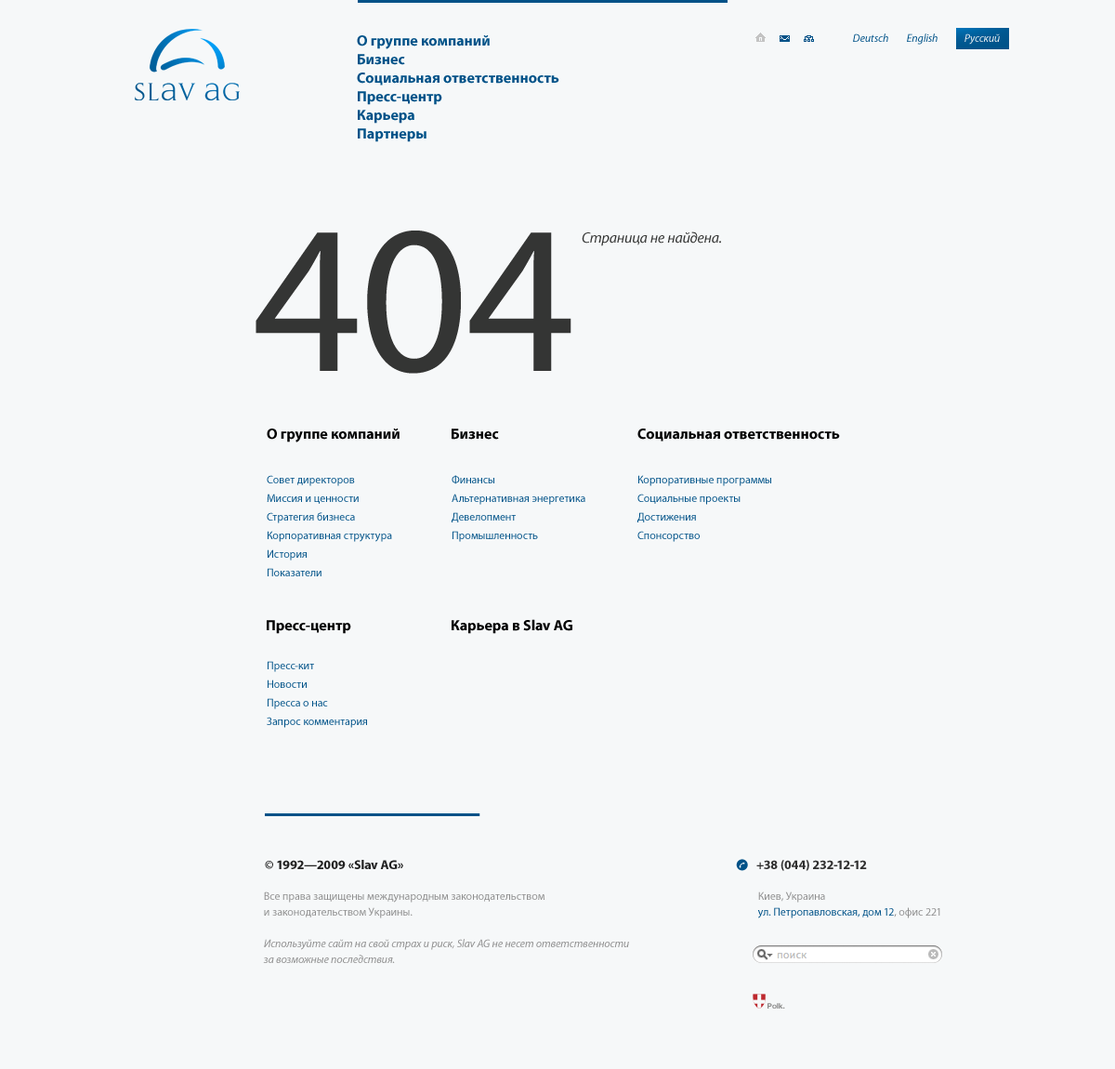
<style>
.page{position:relative;width:1115px;height:1069px;background:#f6f8f9}
.page>*{position:absolute;margin:0}
.t1{font:14.9px "MyriadPro-Bold";color:#005288}
.t2{font:11.2px "MyriadPro-It";color:#005288}
.t3{font:11.2px "MyriadPro-It";color:#eaeef1}
.t4{font:212.3px "MyriadPro-Regular";color:#343534}
.t5{font:14.9px "MyriadPro-It";color:#343534}
.t6{font:14.9px "MyriadPro-Bold";color:#000000}
.t7{font:11.2px/18.6px "MyriadPro-Regular";color:#005288}
.t8{font:13px "MyriadPro-Bold";color:#212121}
.t9{font:13px "MyriadPro-Bold";color:#303030}
.t10{font:11.2px/15.8px "MyriadPro-It";color:#8e8e8e}
.t11{font:11.2px/15.8px "MyriadPro-Regular";color:#8e8e8e}
.t12{font:11.2px/15.8px "MyriadPro-Regular";color:#005288}
.t13{font:7.4px "HelveticaNeue-Bold";color:#8a8a8a}
</style>
<div class="page">
<p class="t1" style="left:357px;top:35px;width:133px;height:14px">О группе компаний</p>
<p class="t2" style="left:853px;top:33px;width:36px;height:9px">Deutsch</p>
<p class="t2" style="left:907px;top:33px;width:31px;height:12px">English</p>
<p class="t3" style="left:965px;top:33px;width:35px;height:12px">Русский</p>
<p class="t1" style="left:358px;top:54px;width:47px;height:11px">Бизнес</p>
<p class="t1" style="left:357px;top:73px;width:203px;height:13px">Социальная ответственность</p>
<p class="t1" style="left:358px;top:91px;width:84px;height:14px">Пресс-центр</p>
<p class="t1" style="left:358px;top:110px;width:57px;height:14px">Карьера</p>
<p class="t1" style="left:358px;top:128px;width:69px;height:14px">Партнеры</p>
<p class="t4" style="left:256px;top:231px;width:316px;height:143px">404</p>
<p class="t5" style="left:582px;top:231px;width:139px;height:15px">Страница не найдена.</p>
<p class="t6" style="left:267px;top:429px;width:133px;height:13px">О группе компаний</p>
<p class="t6" style="left:452px;top:429px;width:47px;height:11px">Бизнес</p>
<p class="t6" style="left:638px;top:429px;width:202px;height:13px">Социальная ответственность</p>
<p class="t7" style="left:267px;top:475px;width:125px;height:101px">Совет директоров<br>Миссия и ценности<br>Стратегия бизнеса<br>Корпоративная структура<br>История<br>Показатели</p>
<p class="t7" style="left:452px;top:475px;width:134px;height:67px">Финансы<br>Альтернативная энергетика<br>Девелопмент<br>Промышленность</p>
<p class="t7" style="left:638px;top:475px;width:134px;height:67px">Корпоративные программы<br>Социальные проекты<br>Достижения<br>Спонсорство</p>
<p class="t6" style="left:267px;top:620px;width:84px;height:14px">Пресс-центр</p>
<p class="t6" style="left:452px;top:619px;width:121px;height:15px">Карьера в Slav AG</p>
<p class="t7" style="left:267px;top:661px;width:100px;height:67px">Пресс-кит<br>Новости<br>Пресса о нас<br>Запрос комментария</p>
<p class="t8" style="left:265px;top:860px;width:138px;height:9px">© 1992—2009 «Slav AG»</p>
<p class="t9" style="left:757px;top:860px;width:110px;height:11px">+38 (044) 232-12-12</p>
<p class="t10" style="left:263px;top:891px;width:366px;height:72px"><span class="t11">Все права защищены международным законодательством<br>и законодательством Украины.<br><br></span>Используйте сайт на свой страх и риск, Slav AG не несет ответственности<br>за возможные последствия.</p>
<p class="t12" style="left:758px;top:891px;width:183px;height:27px"><span class="t11">Киев, Украина<br></span>ул. Петропавловская, дом 12<span class="t11">, офис 221</span></p>
<p class="t13" style="left:768px;top:1003px;width:17px;height:6px">Polk.</p>
</div>
